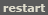
<style>
.page{position:relative;width:48px;height:15px;background:#5a5a5a}
.page>*{position:absolute;margin:0}
.t1{font:11px "Verdana-Bold";color:#dedbcb}
</style>
<div class="page">
<p class="t1" style="left:3px;top:4px;width:43px;height:8px">restart</p>
</div>
